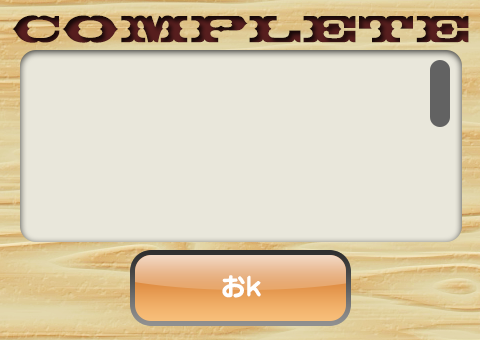
<style>
.page{position:relative;width:480px;height:340px;background:#e9e7db}
.page>*{position:absolute;margin:0}
.t1{font:37.5px "ThunderbirdBT-Regular";letter-spacing:0.05em}
.t2{font:25px "Jun501Pro-Bold";color:#ffffff}
</style>
<div class="page">
<p class="t1" style="left:12px;top:15px;width:457px;height:28px">COMPLETE</p>
<p class="t2" style="left:222px;top:275px;width:39px;height:23px">おk</p>
</div>
